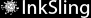
<style>
.page{position:relative;width:91px;height:18px;background:#000000}
.page>*{position:absolute;margin:0}
.t1{font:20.8px "MyriadPro-Regular";color:#ffffff}
</style>
<div class="page">
<p class="t1" style="left:22px;top:0px;width:68px;height:18px">InkSling</p>
</div>
